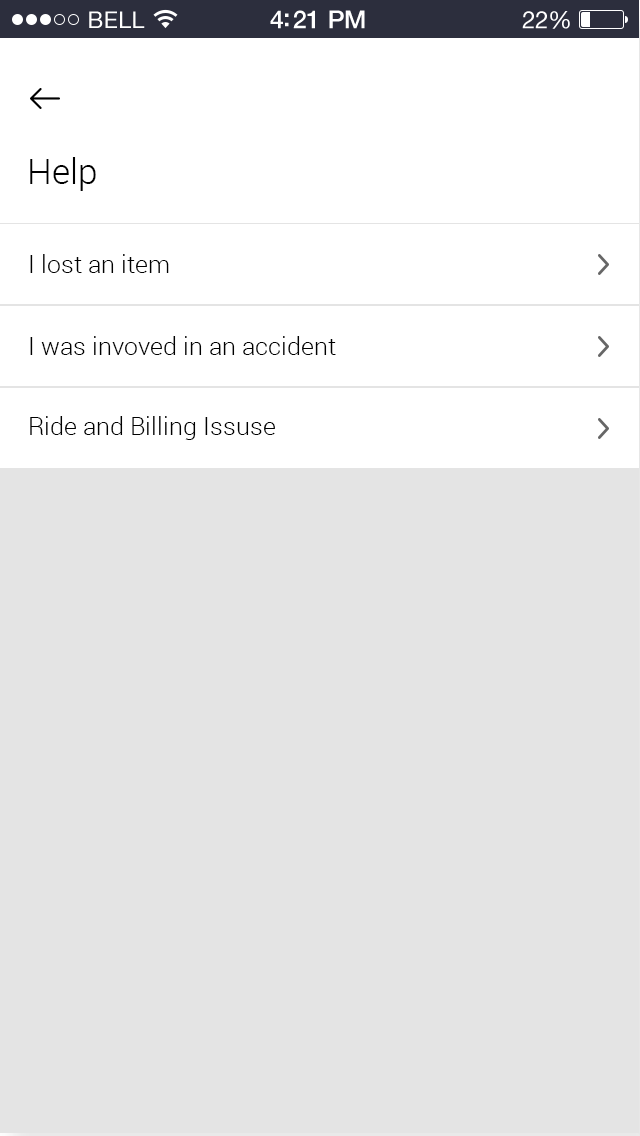
<style>
.page{position:relative;width:640px;height:1136px;background:#e4e4e4}
.page>*{position:absolute;margin:0}
.t1{font:35px "Roboto-Light";color:#000000}
.t2{font:25px "Roboto-Light";color:#000000}
</style>
<div class="page">
<p class="t1" style="left:30px;top:157px;width:66px;height:34px">Help</p>
<p class="t2" style="left:30px;top:254px;width:139px;height:19px">I lost an item</p>
<p class="t2" style="left:30px;top:336px;width:306px;height:19px">I was invoved in an accident</p>
<p class="t2" style="left:30px;top:416px;width:245px;height:24px">Ride and Billing Issuse</p>
</div>
